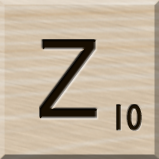
<style>
.page{position:relative;width:159px;height:159px}
.page>*{position:absolute;margin:0}
.t1{font:116px "MS-UIGothic";color:#180e01}
.t2{font:36px "GillSansMT";color:#1c1101;font-weight:bold;scale:0.84 1}
</style>
<div class="page">
<p class="t1" style="left:40px;top:40px;width:57px;height:79px">Z</p>
<p class="t2" style="left:116px;top:104px;width:26px;height:27px">10</p>
</div>
